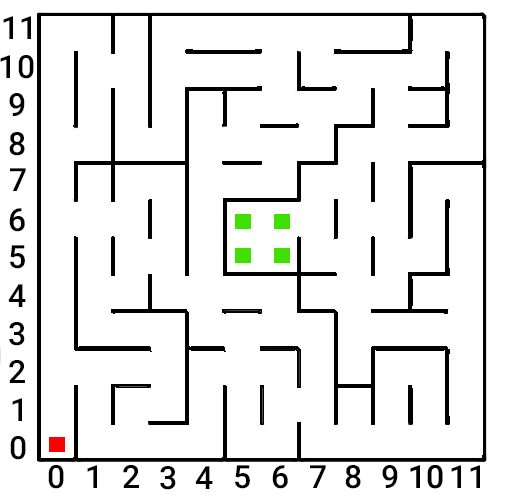
<style>
.page{position:relative;width:510px;height:496px;background:#ffffff}
.page>*{position:absolute;margin:0}
.t1{font:32px "Roboto-Medium";color:#000000}
</style>
<div class="page">
<p class="t1" style="left:3px;top:16px;width:28px;height:23px">11</p>
<p class="t1" style="left:0px;top:55px;width:34px;height:24px">10</p>
<p class="t1" style="left:9px;top:93px;width:16px;height:23px">9</p>
<p class="t1" style="left:9px;top:132px;width:16px;height:24px">8</p>
<p class="t1" style="left:10px;top:168px;width:16px;height:23px">7</p>
<p class="t1" style="left:9px;top:208px;width:16px;height:24px">6</p>
<p class="t1" style="left:10px;top:245px;width:15px;height:24px">5</p>
<p class="t1" style="left:8px;top:284px;width:18px;height:23px">4</p>
<p class="t1" style="left:9px;top:322px;width:16px;height:24px">3</p>
<p class="t1" style="left:9px;top:360px;width:16px;height:23px">2</p>
<p class="t1" style="left:12px;top:398px;width:10px;height:23px">1</p>
<p class="t1" style="left:10px;top:436px;width:16px;height:24px">0</p>
<p class="t1" style="left:48px;top:465px;width:16px;height:24px">0</p>
<p class="t1" style="left:87px;top:465px;width:10px;height:23px">1</p>
<p class="t1" style="left:123px;top:465px;width:16px;height:23px">2</p>
<p class="t1" style="left:160px;top:466px;width:16px;height:24px">3</p>
<p class="t1" style="left:195px;top:466px;width:18px;height:23px">4</p>
<p class="t1" style="left:235px;top:465px;width:15px;height:24px">5</p>
<p class="t1" style="left:272px;top:465px;width:16px;height:24px">6</p>
<p class="t1" style="left:310px;top:465px;width:16px;height:23px">7</p>
<p class="t1" style="left:345px;top:465px;width:16px;height:24px">8</p>
<p class="t1" style="left:382px;top:465px;width:16px;height:23px">9</p>
<p class="t1" style="left:451px;top:465px;width:29px;height:23px">11</p>
</div>
